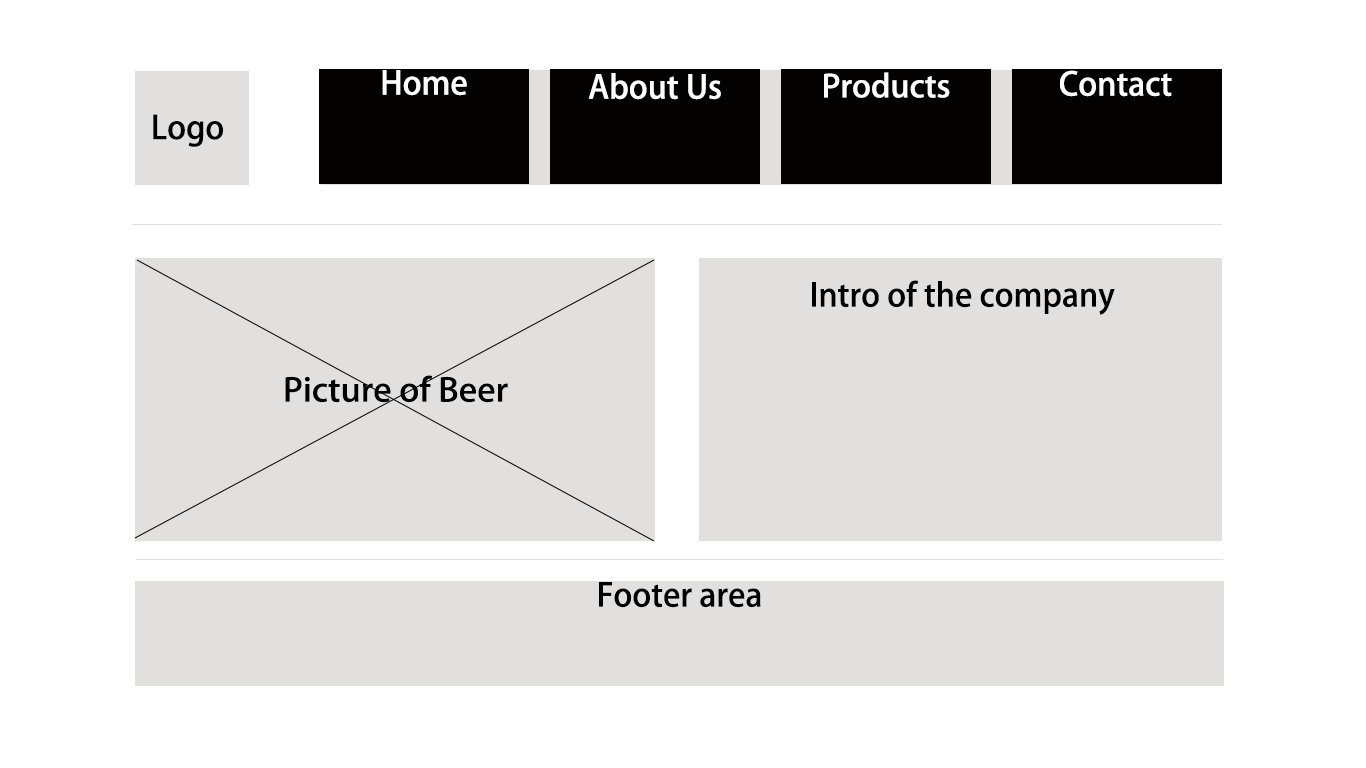
<style>
.page{position:relative;width:1366px;height:768px;background:#ffffff}
.page>*{position:absolute;margin:0}
.t1{font:32px "AdobeHeitiStd-Regular";color:#ffffff}
.t2{font:30.7px "AdobeHeitiStd-Regular";color:#ffffff;scale:1.04 1}
.t3{font:32px "AdobeHeitiStd-Regular";color:#000000}
.t4{font:32px "AdobeHeitiStd-Regular";color:#000000;scale:1.06 1}
</style>
<div class="page">
<p class="t1" style="left:382px;top:70px;width:85px;height:26px">Home</p>
<p class="t1" style="left:588px;top:73px;width:133px;height:27px">About Us</p>
<p class="t2" style="left:824px;top:72px;width:126px;height:26px">Products</p>
<p class="t1" style="left:1060px;top:70px;width:112px;height:27px">Contact</p>
<p class="t3" style="left:153px;top:114px;width:70px;height:33px">Logo</p>
<p class="t3" style="left:812px;top:280px;width:303px;height:35px">Intro of the company</p>
<p class="t4" style="left:285px;top:375px;width:223px;height:28px">Picture of Beer</p>
<p class="t3" style="left:599px;top:582px;width:162px;height:26px">Footer area</p>
</div>
